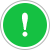
<style>
.page{position:relative;width:50px;height:50px;background:#15c142}
.page>*{position:absolute;margin:0}
.t1{font:37.5px "KannadaMN-Bold";letter-spacing:-0.01em;color:#ffffff}
</style>
<div class="page">
<p class="t1" style="left:22px;top:12px;width:6px;height:25px">!</p>
</div>
